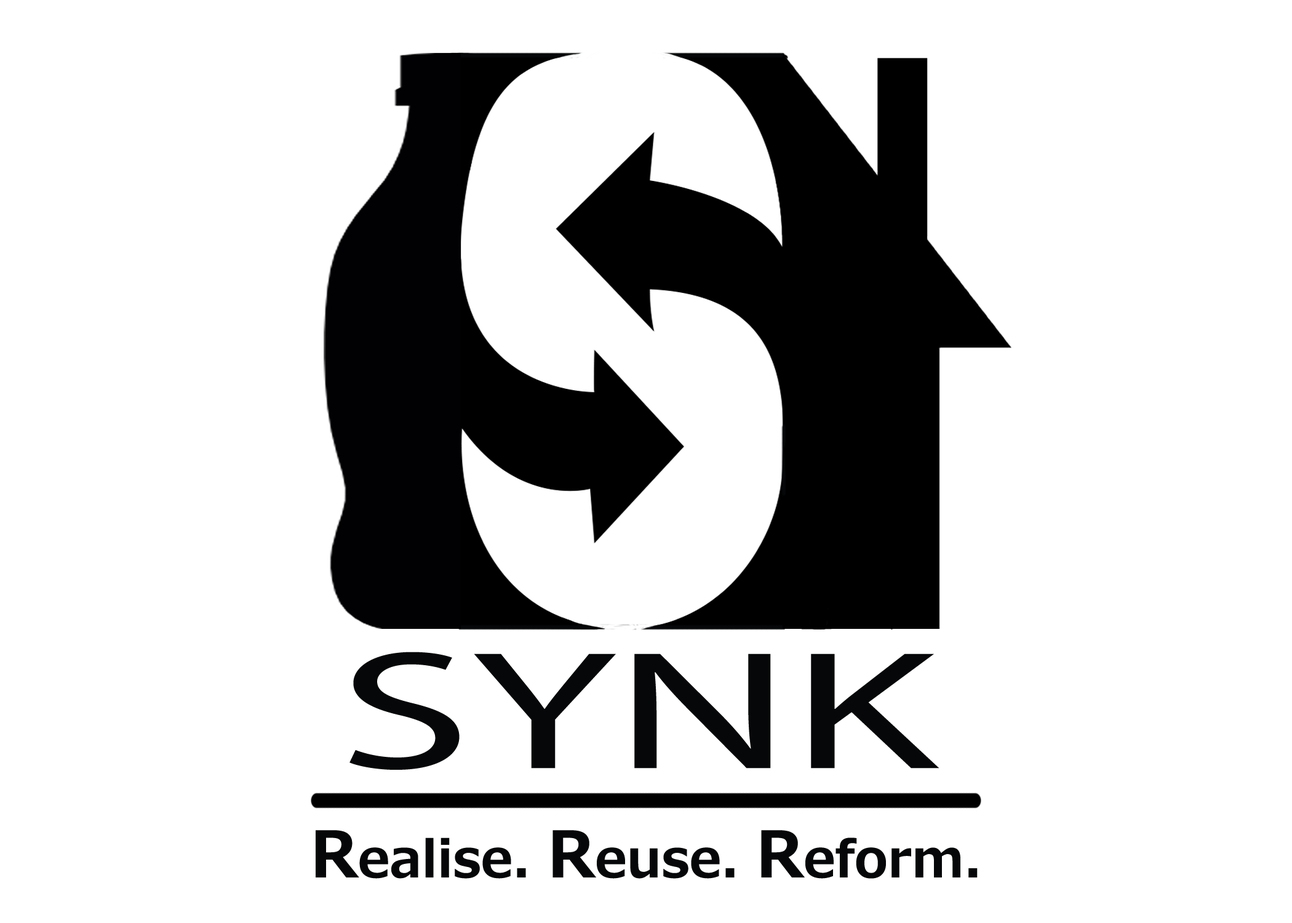
<style>
.page{position:relative;width:1292px;height:923px;background:#ffffff}
.page>*{position:absolute;margin:0}
.t1{font:169.3px "MyriadPro-Regular";color:#050708;scale:1.59 1}
.t2{font:51.3px "Meiryo-Bold";color:#050708}
.t3{font:64.1px "Meiryo-Bold";color:#050708}
</style>
<div class="page">
<p class="t1" style="left:349px;top:652px;width:591px;height:118px">SYNK</p>
<p class="t2" style="left:316px;top:830px;width:662px;height:49px"><span class="t3">R</span>ealise. <span class="t3">R</span>euse. <span class="t3">R</span>eform.</p>
</div>
